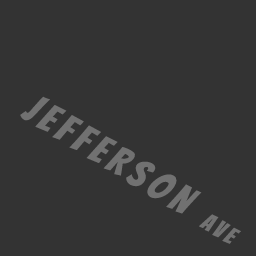
<style>
.page{position:relative;width:256px;height:256px;background:#333333}
.page>*{position:absolute;margin:0}
.t1{font:40px "Bangers-Regular";letter-spacing:0.16em;color:#717171}
.t2{font:24px "Bangers-Regular";letter-spacing:0.16em;color:#717171}
</style>
<div class="page">
<p class="t1" style="left:20px;top:96px;width:221px;height:148px;rotate:31deg">JEFFERSON <span class="t2">AVE</span></p>
</div>
